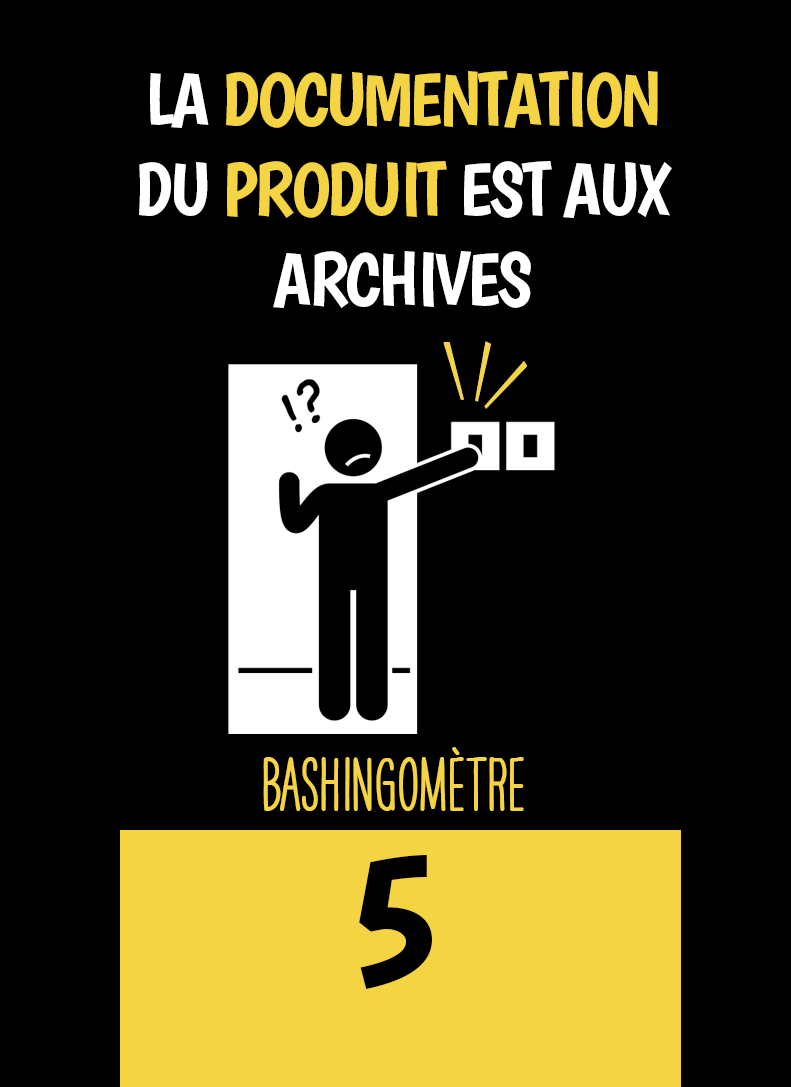
<style>
.page{position:relative;width:791px;height:1087px;background:#000000}
.page>*{position:absolute;margin:0}
.t1{font:75px "Boogaloo-Regular";letter-spacing:-0.04em;color:#ffffff}
.t2{font:75px "Boogaloo-Regular";letter-spacing:-0.04em;color:#f4d443}
.t3{font:66.7px "HAVEANICEDAYTallW04-Bold";color:#f4d443}
.t4{font:200px "Boogaloo-Regular";color:#000000}
</style>
<div class="page">
<p class="t1" style="left:139px;top:71px;width:533px;height:237px;text-align:center">LA <span class="t2">DOCUMENTATION <br></span>DU <span class="t2">PRODUIT </span>EST AUX ARCHIVES</p>
<p class="t3" style="left:263px;top:747px;width:261px;height:64px">BASHINgomètre</p>
<p class="t4" style="left:359px;top:855px;width:73px;height:134px">5</p>
</div>
